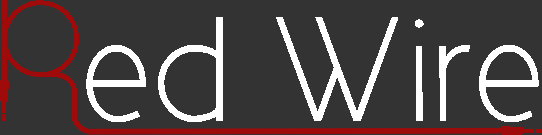
<style>
.page{position:relative;width:542px;height:135px;background:#333333}
.page>*{position:absolute;margin:0}
.t1{font:150px "CicleFina";color:#ffffff}
.t2{font:150px "LightCableDemoRegular";color:#9f0b0b}
</style>
<div class="page">
<p class="t1" style="left:0px;top:0px;width:539px;height:123px"><span class="t2">R</span>ed Wire</p>
</div>
